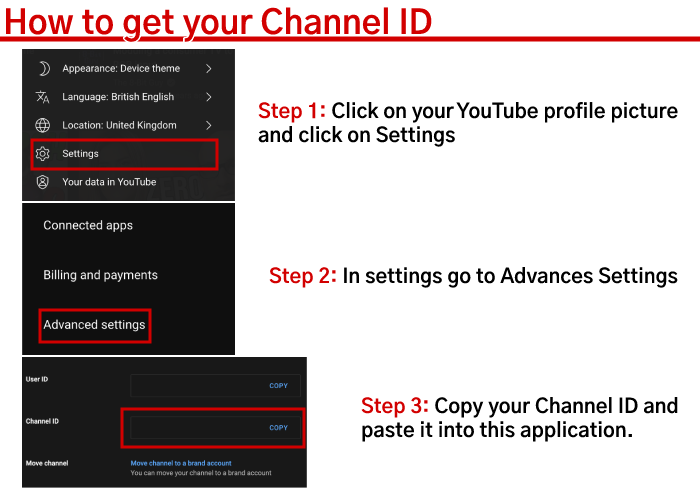
<style>
.page{position:relative;width:700px;height:500px;background:#ffffff}
.page>*{position:absolute;margin:0}
.t1{font:33.3px "GothicA1-Bold";color:#d20000}
.t2{font:20px "GothicA1-Bold";color:#000000}
.t3{font:20px "GothicA1-Bold";color:#d20000}
</style>
<div class="page">
<p class="t1" style="left:6px;top:7px;width:426px;height:35px">How to get your Channel ID</p>
<p class="t2" style="left:258px;top:102px;width:420px;height:45px"><span class="t3">Step 1: </span>Click on your YouTube profile picture<br>and click on Settings</p>
<p class="t2" style="left:269px;top:267px;width:409px;height:21px"><span class="t3">Step 2: </span>In settings go to Advances Settings</p>
<p class="t2" style="left:361px;top:397px;width:317px;height:45px"><span class="t3">Step 3: </span>Copy your Channel ID and <br>paste it into this application.</p>
</div>
